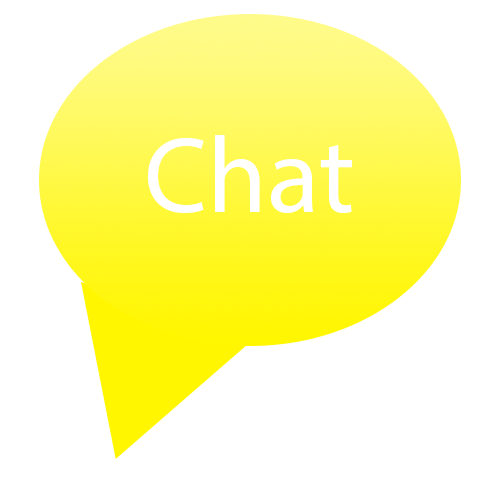
<style>
.page{position:relative;width:500px;height:500px;background:#ffffff}
.page>*{position:absolute;margin:0}
.t1{font:108.3px "MyriadPro-Regular";color:#ffffff}
</style>
<div class="page">
<p class="t1" style="left:148px;top:135px;width:204px;height:79px">Chat</p>
</div>
